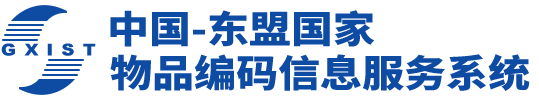
<style>
.page{position:relative;width:539px;height:100px;background:#ffffff}
.page>*{position:absolute;margin:0}
.t1{font:37.8px "SourceHanSansCN-Heavy";color:#0e4ca4;scale:1.11 1}
.t2{font:16.2px "Arial-Black";letter-spacing:0.06em;color:#0e4ca4;scale:1.11 1}
</style>
<div class="page">
<p class="t1" style="left:110px;top:10px;width:265px;height:37px">中国-东盟国家</p>
<p class="t2" style="left:1px;top:43px;width:95px;height:13px">G X I S T</p>
<p class="t1" style="left:110px;top:54px;width:420px;height:37px">物品编码信息服务系统</p>
</div>
